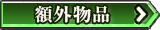
<style>
.page{position:relative;width:160px;height:30px}
.page>*{position:absolute;margin:0}
.t1{font:18px "RyuminPr6N-ExBold";letter-spacing:0.075em;color:#fff6f3}
</style>
<div class="page">
<p class="t1" style="left:35px;top:5px;width:75px;height:18px">額外物品</p>
</div>
